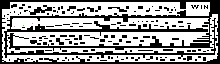
<style>
.page{position:relative;width:220px;height:64px;background:#ffffff}
.page>*{position:absolute;margin:0}
.t1{font:8.3px "CopperplateGothic-Bold";letter-spacing:0.075em;color:#000000}
</style>
<div class="page">
<p class="t1" style="left:191px;top:5px;width:17px;height:4px">win</p>
</div>
